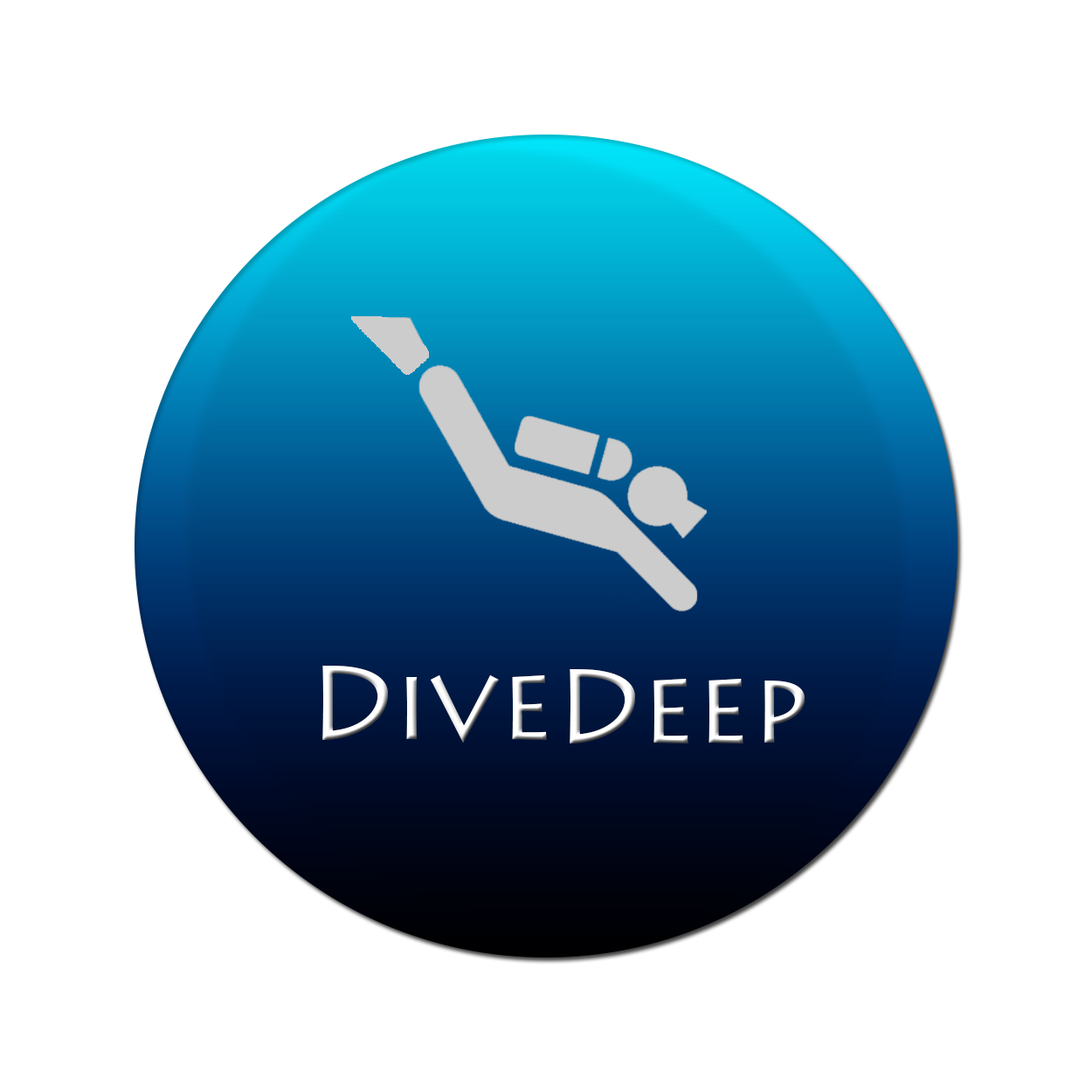
<style>
.page{position:relative;width:1092px;height:1092px;background:#ffffff}
.page>*{position:absolute;margin:0}
.t1{font:104.8px "LithosPro-Regular";color:#ffffff}
</style>
<div class="page">
<p class="t1" style="left:322px;top:666px;width:225px;height:77px">Dive</p>
<p class="t1" style="left:570px;top:669px;width:235px;height:74px">Deep</p>
</div>
